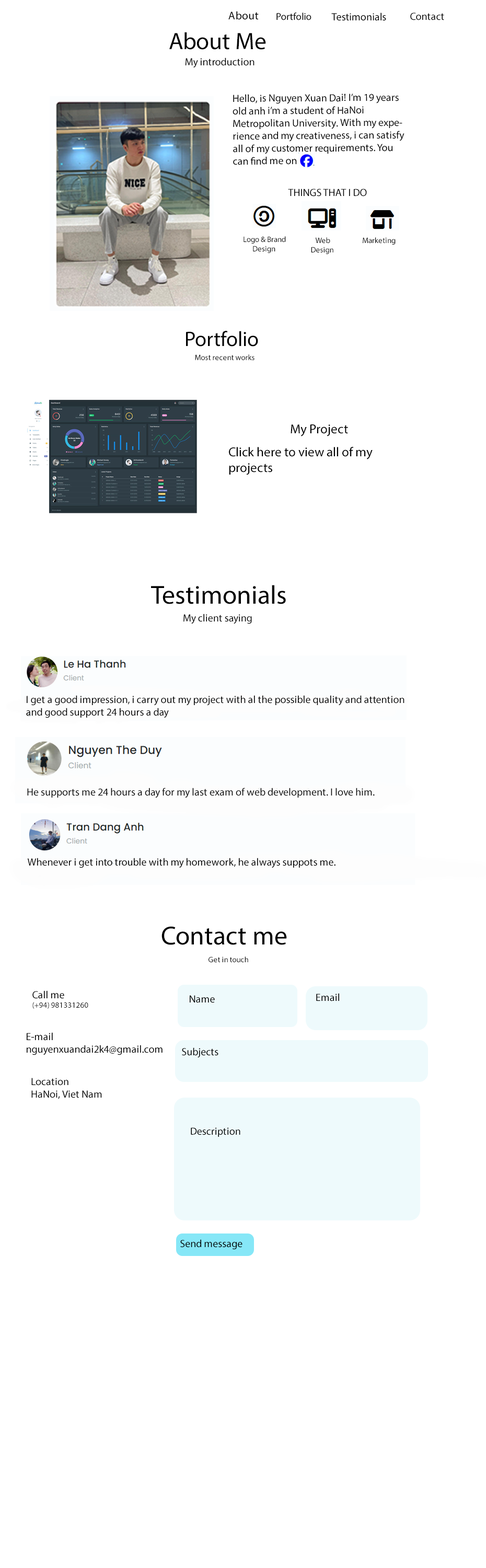
<style>
.page{position:relative;width:486px;height:1568px;background:#ffffff}
.page>*{position:absolute;margin:0}
.t1{font:11.2px "MyriadPro-Regular";color:#000000}
.t2{font:10.1px "MyriadPro-Regular";color:#000000}
.t3{font:10.6px "MyriadPro-Regular";color:#000000}
.t4{font:10.5px "MyriadPro-Regular";color:#000000}
.t5{font:23.8px "MyriadPro-Regular";color:#000000}
.t6{font:7.8px "MyriadPro-Regular";color:#000000}
.t7{font:20.9px "MyriadPro-Regular";color:#000000}
.t8{font:13.1px "MyriadPro-Regular";color:#000000}
.t9{font:26.1px "MyriadPro-Regular";color:#000000}
</style>
<div class="page">
<p class="t1" style="left:228px;top:11px;width:31px;height:9px">About</p>
<p class="t2" style="left:276px;top:13px;width:36px;height:7px">Portfolio</p>
<p class="t3" style="left:331px;top:13px;width:55px;height:8px">Testimonials</p>
<p class="t4" style="left:410px;top:13px;width:34px;height:7px">Contact</p>
<p class="t5" style="left:169px;top:32px;width:97px;height:18px">About Me</p>
<p class="t4" style="left:185px;top:57px;width:70px;height:11px">My introduction</p>
<p class="t4" style="left:233px;top:94px;width:172px;height:71px">Hello, is Nguyen Xuan Dai! I’m 19 years old anh i’m a student of HaNoi              Metropolitan University. With my experience and my creativeness, i can satisfy all of my customer requirements. You can find me on</p>
<p class="t4" style="left:288px;top:189px;width:79px;height:8px">THINGS THAT I DO</p>
<p class="t6" style="left:244px;top:236px;width:42px;height:17px">Logo &amp; Brand<br>      Design</p>
<p class="t6" style="left:311px;top:237px;width:22px;height:17px">Web<br>    Design</p>
<p class="t6" style="left:363px;top:237px;width:33px;height:8px">Marketing</p>
<p class="t7" style="left:186px;top:331px;width:72px;height:16px">Portfolio</p>
<p class="t6" style="left:195px;top:354px;width:60px;height:6px">Most recent works</p>
<p class="t8" style="left:291px;top:424px;width:57px;height:12px">My Project</p>
<p class="t8" style="left:229px;top:447px;width:144px;height:28px">Click here to view all of my projects</p>
<p class="t9" style="left:151px;top:585px;width:135px;height:19px">Testimonials</p>
<p class="t4" style="left:183px;top:614px;width:69px;height:10px">My client saying</p>
<p class="t4" style="left:26px;top:695px;width:379px;height:23px">I get a good impression, i carry out my project with al the possible quality and attention<br>and good support 24 hours a day</p>
<p class="t4" style="left:27px;top:788px;width:348px;height:10px">He supports me 24 hours a day for my last exam of web development. I love him.</p>
<p class="t4" style="left:27px;top:858px;width:309px;height:10px">Whenever i get into trouble with my homework, he always suppots me.</p>
<p class="t9" style="left:162px;top:926px;width:125px;height:19px">Contact me</p>
<p class="t6" style="left:209px;top:956px;width:39px;height:6px">Get in touch</p>
<p class="t6" style="left:32px;top:990px;width:56px;height:19px"><span class="t4">Call me<br></span>(+94) 981331260</p>
<p class="t4" style="left:190px;top:995px;width:25px;height:8px">Name</p>
<p class="t4" style="left:316px;top:993px;width:23px;height:8px">Email</p>
<p class="t4" style="left:27px;top:1032px;width:136px;height:23px">E-mail<br>nguyenxuandai2k4@gmail.com</p>
<p class="t4" style="left:182px;top:1047px;width:36px;height:11px">Subjects</p>
<p class="t4" style="left:31px;top:1078px;width:71px;height:21px">Location<br>HaNoi, Viet Nam</p>
<p class="t4" style="left:191px;top:1127px;width:49px;height:10px">Description</p>
<p class="t4" style="left:180px;top:1239px;width:63px;height:11px">Send message</p>
</div>
